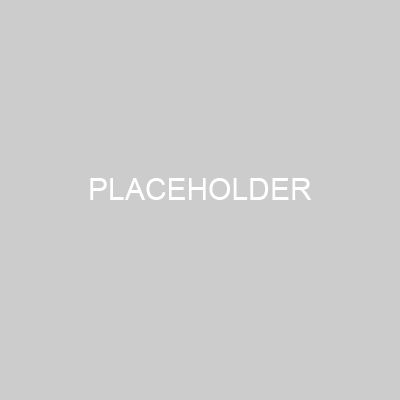
<style>
.page{position:relative;width:400px;height:400px;background:#cccccc}
.page>*{position:absolute;margin:0}
.t1{font:30px "ArialMT";color:#ffffff;text-transform:uppercase}
</style>
<div class="page">
<p class="t1" style="left:90px;top:178px;width:222px;height:22px">Placeholder</p>
</div>
